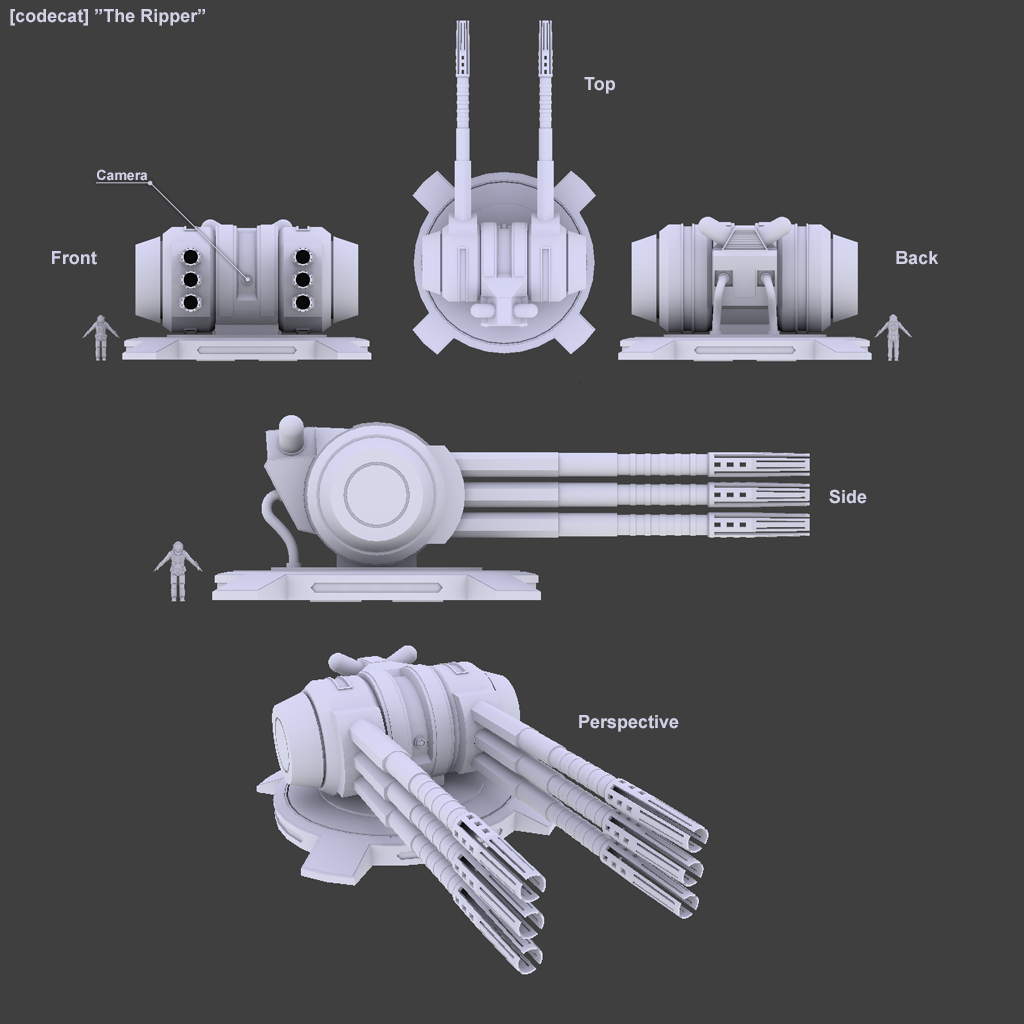
<style>
.page{position:relative;width:1024px;height:1024px;background:#3f3f3f}
.page>*{position:absolute;margin:0}
.t1{font:18px "Arial-BoldMT";color:#d2d2e6}
.t2{font:14px "Arial-BoldMT";color:#d2d2e6}
</style>
<div class="page">
<p class="t1" style="left:10px;top:9px;width:195px;height:17px">[codecat] ”The Ripper”</p>
<p class="t1" style="left:584px;top:77px;width:31px;height:17px">Top</p>
<p class="t2" style="left:97px;top:169px;width:51px;height:12px">Camera</p>
<p class="t1" style="left:52px;top:251px;width:45px;height:14px">Front</p>
<p class="t1" style="left:896px;top:251px;width:42px;height:14px">Back</p>
<p class="t1" style="left:829px;top:489px;width:38px;height:15px">Side</p>
<p class="t1" style="left:579px;top:715px;width:100px;height:17px">Perspective</p>
</div>
